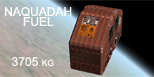
<style>
.page{position:relative;width:154px;height:77px}
.page>*{position:absolute;margin:0}
.t1{font:12px/10px "ArialMT";color:#fcfcfc;font-variant:small-caps}
.t2{font:12px "ArialMT";color:#fcfcfc;font-variant:small-caps}
</style>
<div class="page">
<p class="t1" style="left:5px;top:7px;width:67px;height:19px;text-align:center">NAQUADAH<br>FUEL</p>
<p class="t2" style="left:12px;top:57px;width:42px;height:9px">3705 kg</p>
</div>
